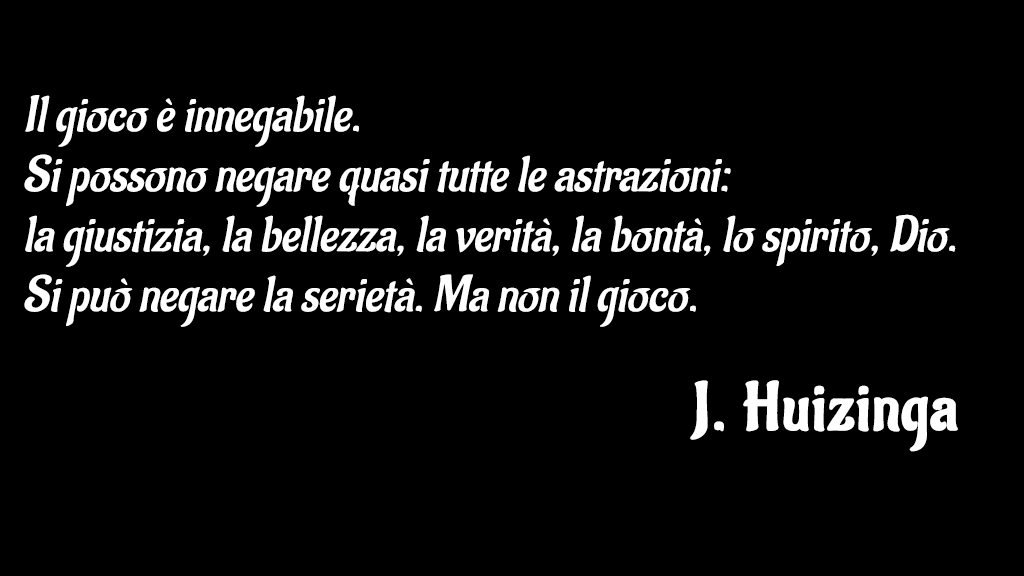
<style>
.page{position:relative;width:1024px;height:576px;background:#000000}
.page>*{position:absolute;margin:0}
.t1{font:50px "Aladin-Regular";color:#ffffff;font-style:italic}
.t2{font:66.7px "Aladin-Regular";letter-spacing:0.01em;color:#ffffff;font-weight:bold}
</style>
<div class="page">
<p class="t1" style="left:24px;top:95px;width:932px;height:232px;text-align:justify">Il gioco è innegabile. <br>Si possono negare quasi tutte le astrazioni: <br>la giustizia, la bellezza, la verità, la bontà, lo spirito, Dio. <br>Si può negare la serietà. Ma non il gioco.</p>
<p class="t2" style="left:690px;top:380px;width:268px;height:72px">J. Huizinga</p>
</div>
